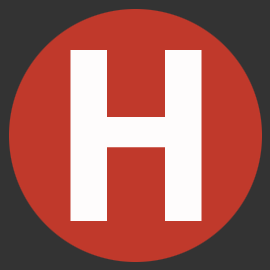
<style>
.page{position:relative;width:270px;height:270px;background:#c0392b}
.page>*{position:absolute;margin:0}
.t1{font:240px "DroidSans-Bold";color:#fefcfc}
</style>
<div class="page">
<p class="t1" style="left:70px;top:50px;width:132px;height:171px">H</p>
</div>
